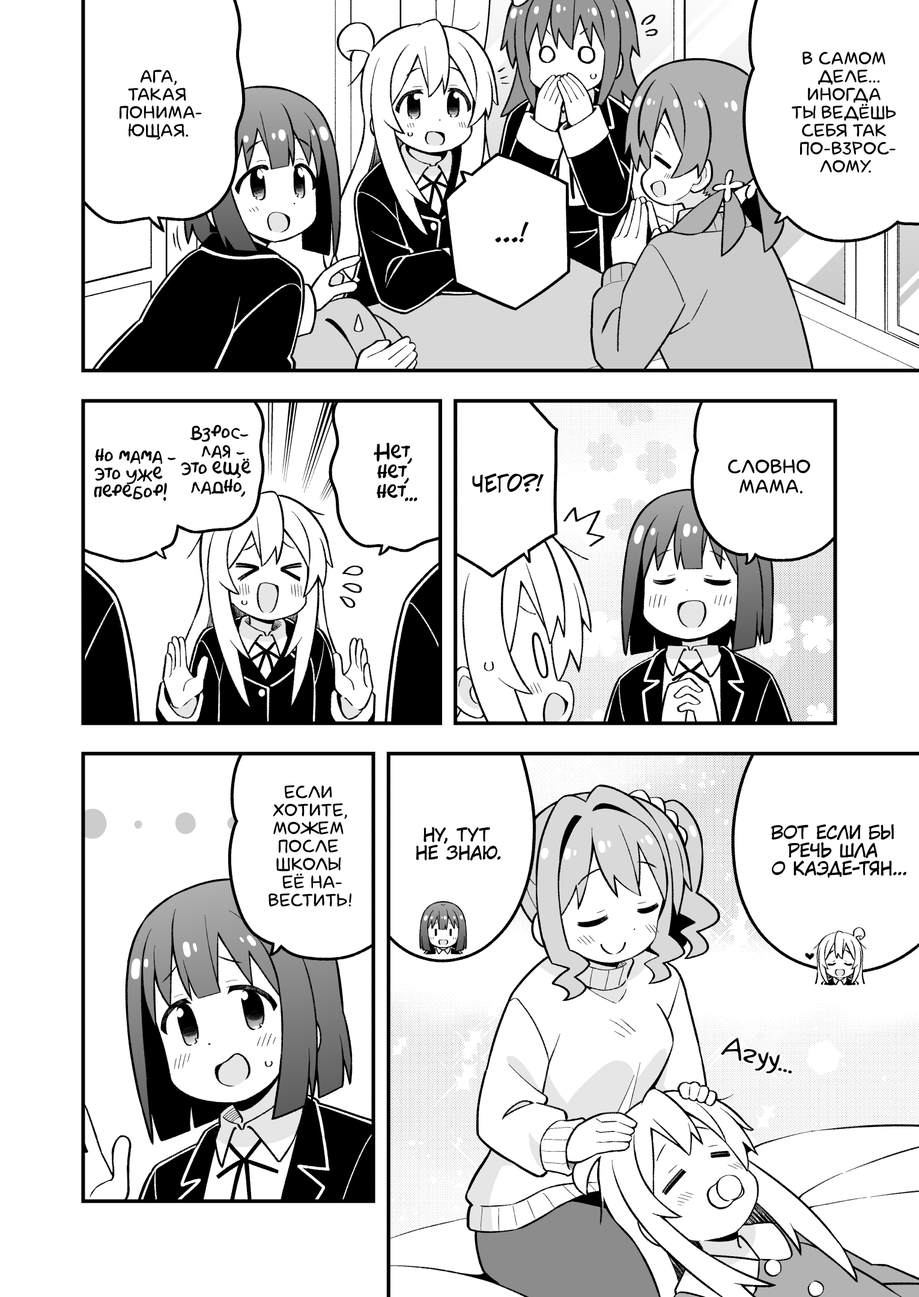
<style>
.page{position:relative;width:919px;height:1297px;background:#ffffff}
.page>*{position:absolute;margin:0}
.t1{font:18px "laCartoonerie";color:#000000;text-transform:uppercase}
.t2{font:25.2px "v_CCJeffCampbell";color:#000000;text-transform:uppercase}
.t3{font:18px "AkbarPlain";color:#000000}
.t4{font:19.8px "AkbarPlain";color:#000000}
.t5{font:19.8px "laCartoonerie";color:#000000;text-transform:uppercase}
.t6{font:21.6px "v_CCJeffCampbell";color:#000000;text-transform:uppercase}
.t7{font:18px "KuraiVoice2";color:#000000;text-transform:uppercase}
.t8{font:28.8px "v_Augie";color:#000000}
</style>
<div class="page">
<p class="t1" style="left:792px;top:52px;width:104px;height:121px;text-align:center">В самом<br>деле...<br>Иногда<br>ты ведёшь<br>себя так<br>по-взрос-<br>лому.</p>
<p class="t1" style="left:120px;top:70px;width:82px;height:70px;text-align:center">Ага,<br>такая<br>понима-<br>ющая.</p>
<p class="t2" style="left:495px;top:222px;width:34px;height:21px">...!</p>
<p class="t3" style="left:181px;top:425px;width:70px;height:72px;text-align:center">Взрос-<br>лая -<br>это ещё<br>ладно,</p>
<p class="t3" style="left:94px;top:448px;width:82px;height:53px;text-align:center">но мама -<br>это уже<br>перебор!</p>
<p class="t4" style="left:374px;top:443px;width:43px;height:59px;text-align:center">Нет,<br>нет,<br>нет...</p>
<p class="t5" style="left:728px;top:459px;width:82px;height:35px;text-align:center">Словно<br>мама.</p>
<p class="t6" style="left:472px;top:473px;width:72px;height:20px">Чего?!</p>
<p class="t1" style="left:269px;top:786px;width:82px;height:121px;text-align:center">Если<br>хотите,<br>можем<br>после<br>школы<br>её на-<br>вестить!</p>
<p class="t7" style="left:416px;top:827px;width:85px;height:34px;text-align:center">Ну, тут<br>не знаю.</p>
<p class="t7" style="left:771px;top:824px;width:135px;height:54px;text-align:center">Вот если бы<br>речь шла<br>о Каэде-тян...</p>
<p class="t8" style="left:721px;top:1038px;width:71px;height:36px;rotate:14deg">Агуу...</p>
</div>
